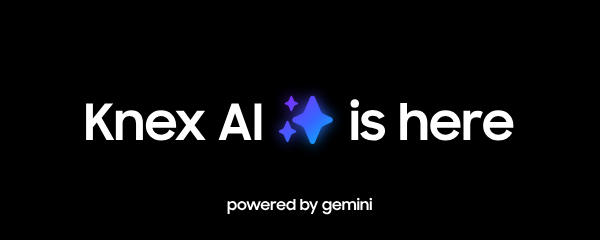
<style>
.page{position:relative;width:600px;height:240px;background:#000000}
.page>*{position:absolute;margin:0}
.t1{font:50px "SamsungSharpSans-Bold";color:#ffffff}
.t2{font:15px "SamsungSharpSans-Bold";color:#ffffff}
</style>
<div class="page">
<p class="t1" style="left:86px;top:99px;width:428px;height:42px">Knex AI       is here</p>
<p class="t2" style="left:227px;top:197px;width:146px;height:18px">powered by gemini</p>
</div>
